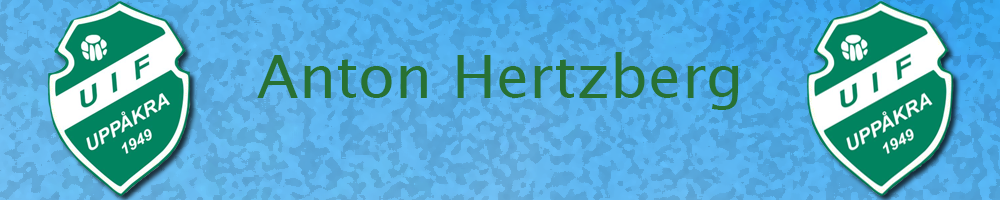
<style>
.page{position:relative;width:1000px;height:200px}
.page>*{position:absolute;margin:0}
.t1{font:60px "LucidaSans";color:#287133}
</style>
<div class="page">
<p class="t1" style="left:257px;top:52px;width:481px;height:58px">Anton Hertzberg</p>
</div>
